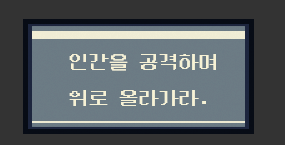
<style>
.page{position:relative;width:285px;height:145px;background:#333333}
.page>*{position:absolute;margin:0}
.t1{font:20px/36px "DungGeunMo";color:#f7f2d5}
</style>
<div class="page">
<p class="t1" style="left:69px;top:54px;width:147px;height:52px">인간을 공격하며  <br>위로 올라가라.</p>
</div>
